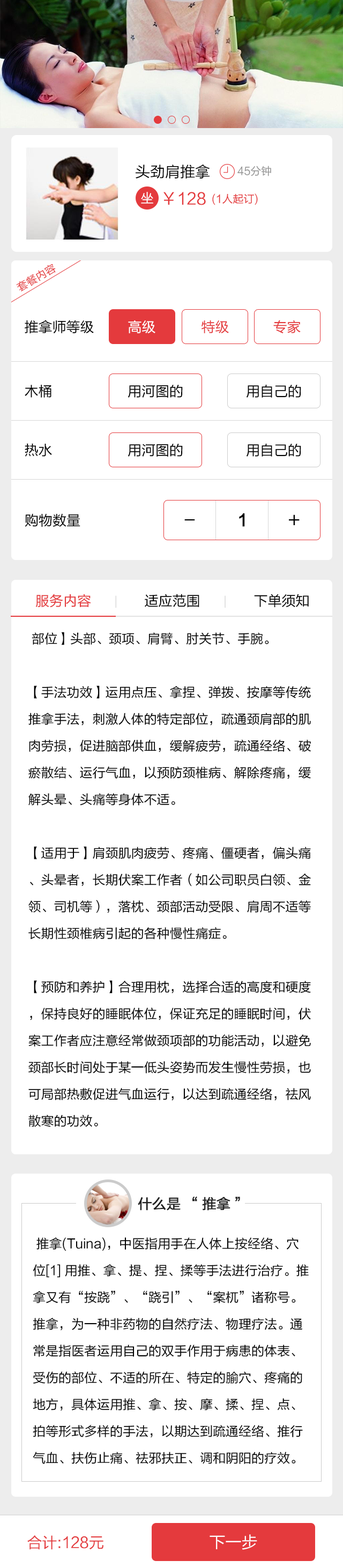
<style>
.page{position:relative;width:343px;height:1568px;background:#ffffff}
.page>*{position:absolute;margin:0}
.t1{font:15px "FZLTHJW--GB1-0";color:#000000}
.t2{font:10.7px "FZLTHJW--GB1-0";color:#929292}
.t3{font:12.9px "FZLTHJW--GB1-0";color:#ffffff}
.t4{font:16.1px "FZLTHJW--GB1-0";color:#e43a3d}
.t5{font:10.7px "FZLTHJW--GB1-0";color:#e43a3d}
.t6{font:13.9px "FZLTHJW--GB1-0";color:#000000}
.t7{font:13.9px "FZLTHJW--GB1-0";color:#ffffff}
.t8{font:13.9px "FZLTHJW--GB1-0";color:#e43a3d}
.t9{font:13.9px "FZLTHJW--GB1-0";color:#010101}
.t10{font:19.3px "FZLTHJW--GB1-0";color:#000000;scale:0.81 1}
.t11{font:16.1px "FZLTZHK--GBK1-0";color:#000000}
.t12{font:19.3px "FZLTHJW--GB1-0";color:#000000}
.t13{font:11.8px "FZLTHJW--GB1-0";color:#dbdbdb}
.t14{font:12.9px/26.8px "FZLTHJW--GB1-0";color:#000000}
.t15{font:13.9px "FZLTHJW--GB1-0";color:#222222;font-weight:bold}
.t16{font:15px "FZLTHJW--GB1-0";color:#e43a3d}
.t17{font:16.1px "FZLTHJW--GB1-0";color:#ffffff}
</style>
<div class="page">
<p class="t1" style="left:136px;top:165px;width:74px;height:14px">头劲肩推拿</p>
<p class="t2" style="left:237px;top:166px;width:34px;height:10px">45分钟</p>
<p class="t3" style="left:141px;top:192px;width:12px;height:12px">坐</p>
<p class="t4" style="left:163px;top:192px;width:43px;height:13px">￥128</p>
<p class="t5" style="left:212px;top:193px;width:46px;height:12px">(1人起订)</p>
<p class="t5" style="left:16px;top:264px;width:40px;height:28px;rotate:-30deg">套餐内容</p>
<p class="t6" style="left:25px;top:320px;width:69px;height:14px">推拿师等级</p>
<p class="t7" style="left:128px;top:320px;width:27px;height:13px">高级</p>
<p class="t8" style="left:201px;top:320px;width:28px;height:13px">特级</p>
<p class="t8" style="left:273px;top:320px;width:28px;height:13px">专家</p>
<p class="t6" style="left:25px;top:384px;width:26px;height:14px">木桶</p>
<p class="t9" style="left:128px;top:385px;width:55px;height:13px">用河图的</p>
<p class="t9" style="left:246px;top:384px;width:55px;height:14px">用自己的</p>
<p class="t6" style="left:25px;top:443px;width:27px;height:14px">热水</p>
<p class="t9" style="left:128px;top:444px;width:55px;height:13px">用河图的</p>
<p class="t9" style="left:246px;top:443px;width:55px;height:14px">用自己的</p>
<p class="t6" style="left:25px;top:513px;width:55px;height:14px">购物数量</p>
<p class="t10" style="left:184px;top:519px;width:11px;height:2px">_</p>
<p class="t11" style="left:239px;top:513px;width:6px;height:14px">1</p>
<p class="t12" style="left:289px;top:514px;width:11px;height:11px">+</p>
<p class="t8" style="left:35px;top:594px;width:274px;height:14px">服务内容      <span class="t13">|       </span><span class="t6">适应范围      </span><span class="t13">|       </span><span class="t6">下单须知</span></p>
<p class="t14" style="left:28px;top:632px;width:283px;height:495px">部位】头部、颈项、肩臂、肘关节、手腕。<br><br>【手法功效】运用点压、拿捏、弹拨、按摩等传统推拿手法，刺激人体的特定部位，疏通颈肩部的肌肉劳损，促进脑部供血，缓解疲劳，疏通经络、破瘀散结、运行气血，以预防颈椎病、解除疼痛，缓解头晕、头痛等身体不适。<br><br>【适用于】肩颈肌肉疲劳、疼痛、僵硬者，偏头痛、头晕者，长期伏案工作者（如公司职员白领、金领、司机等），落枕、颈部活动受限、肩周不适等长期性颈椎病引起的各种慢性痛症。<br><br>【预防和养护】合理用枕，选择合适的高度和硬度，保持良好的睡眠体位，保证充足的睡眠时间，伏案工作者应注意经常做颈项部的功能活动，以避免颈部长时间处于某一低头姿势而发生慢性劳损，也可局部热敷促进气血运行，以达到疏通经络，祛风散寒的功效。</p>
<p class="t15" style="left:138px;top:1197px;width:102px;height:14px">什么是“推拿”</p>
<p class="t14" style="left:33px;top:1237px;width:276px;height:227px">推拿(Tuina)，中医指用手在人体上按经络、穴位[1] 用推、拿、提、捏、揉等手法进行治疗。推拿又有“按跷”、“跷引”、“案杌”诸称号。推拿，为一种非药物的自然疗法、物理疗法。通常是指医者运用自己的双手作用于病患的体表、受伤的部位、不适的所在、特定的腧穴、疼痛的地方，具体运用推、拿、按、摩、揉、捏、点、拍等形式多样的手法，以期达到疏通经络、推行气血、扶伤止痛、祛邪扶正、调和阴阳的疗效。</p>
<p class="t16" style="left:27px;top:1535px;width:76px;height:15px">合计:128元</p>
<p class="t17" style="left:210px;top:1534px;width:47px;height:16px">下一步</p>
</div>
